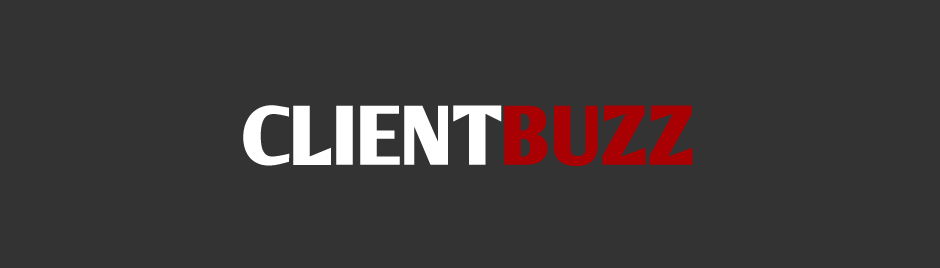
<style>
.page{position:relative;width:940px;height:268px;background:#333333}
.page>*{position:absolute;margin:0}
.t1{font:82.7px "ArmWrestler-Bold";color:#ffffff}
.t2{font:82.7px "ArmWrestler-Bold";color:#a90003}
</style>
<div class="page">
<p class="t1" style="left:243px;top:105px;width:450px;height:61px">CLIENT<span class="t2">BUZZ</span></p>
</div>
